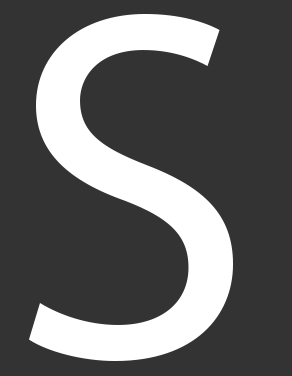
<style>
.page{position:relative;width:292px;height:376px;background:#333333}
.page>*{position:absolute;margin:0}
.t1{font:500px "MyriadPro-Regular";color:#ffffff}
</style>
<div class="page">
<p class="t1" style="left:29px;top:14px;width:204px;height:347px">S</p>
</div>
